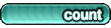
<style>
.page{position:relative;width:111px;height:28px;background:#ffffff}
.page>*{position:absolute;margin:0}
.t1{font:14px "FutoGoB101Pr5-Bold";color:#fffffa;font-weight:bold}
</style>
<div class="page">
<p class="t1" style="left:64px;top:9px;width:38px;height:11px">count</p>
</div>
